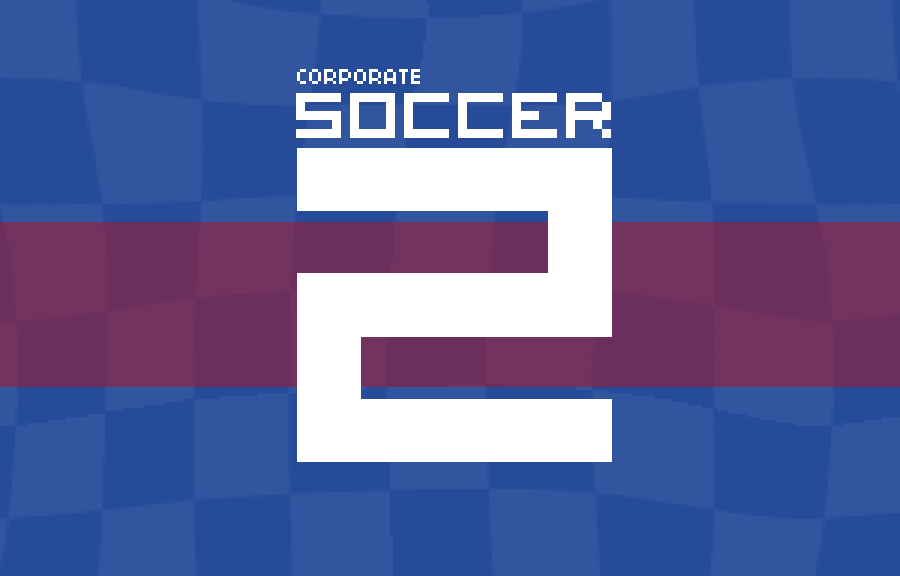
<style>
.page{position:relative;width:900px;height:576px;background:#264c99}
.page>*{position:absolute;margin:0}
.t1{font:24px "04b03";color:#ffffff}
.t2{font:117px "VisitorTT2BRK";color:#ffffff}
.t3{font:807.3px "VisitorTT2BRK";color:#ffffff}
</style>
<div class="page">
<p class="t1" style="left:297px;top:69px;width:123px;height:15px">CORPORATE</p>
<p class="t2" style="left:296px;top:93px;width:315px;height:45px">SOCCER</p>
<p class="t3" style="left:297px;top:148px;width:315px;height:314px">2</p>
</div>
